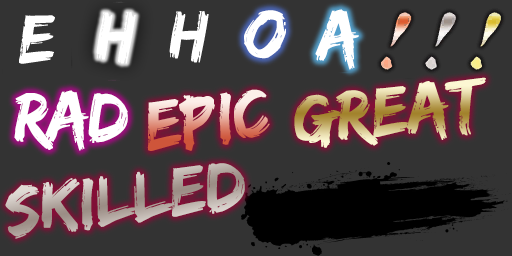
<style>
.page{position:relative;width:512px;height:256px;background:#333333}
.page>*{position:absolute;margin:0}
.t1{font:72px "EdoSZ";letter-spacing:-0.025em;color:#ffffff}
.t2{font:72px "EdoSZ"}
</style>
<div class="page">
<p class="t1" style="left:19px;top:15px;width:36px;height:49px">e</p>
<p class="t1" style="left:96px;top:12px;width:40px;height:52px">h</p>
<p class="t1" style="left:169px;top:11px;width:40px;height:52px">h</p>
<p class="t1" style="left:244px;top:10px;width:42px;height:49px">o</p>
<p class="t1" style="left:315px;top:9px;width:44px;height:61px">a</p>
<p class="t2" style="left:294px;top:77px;width:192px;height:71px;rotate:-5deg">great</p>
<p class="t2" style="left:147px;top:89px;width:123px;height:62px;rotate:-7deg">epic</p>
<p class="t1" style="left:14px;top:90px;width:114px;height:61px">RAD</p>
<p class="t2" style="left:5px;top:163px;width:240px;height:76px;rotate:-7deg">skilled</p>
</div>
